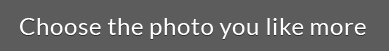
<style>
.page{position:relative;width:389px;height:51px;background:#5c5c5c}
.page>*{position:absolute;margin:0}
.t1{font:24px "Lato-Regular";letter-spacing:0.025em;color:#ffffff}
</style>
<div class="page">
<p class="t1" style="left:20px;top:18px;width:346px;height:21px">Choose the photo you like more</p>
</div>
